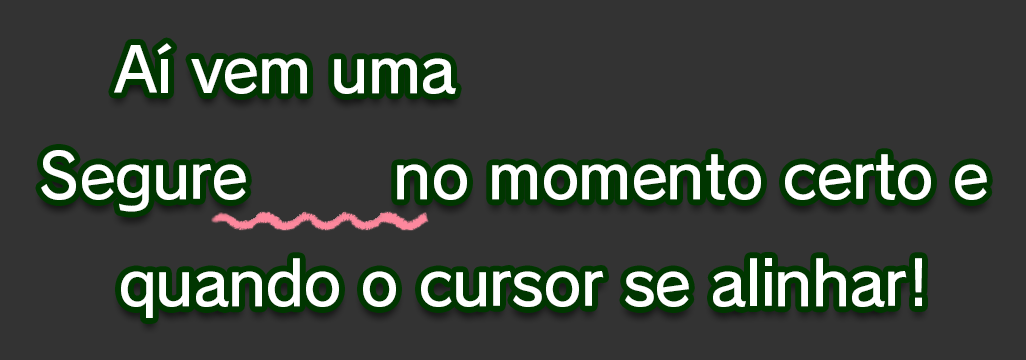
<style>
.page{position:relative;width:1026px;height:360px;background:#333333}
.page>*{position:absolute;margin:0}
.t1{font:61.3px/106.7px "RodinPro-DB";letter-spacing:-0.022em;color:#ffffff}
.t2{font:69.3px/106.7px "NewRodinPro-DB";letter-spacing:-0.022em;color:#ffffff}
</style>
<div class="page">
<p class="t1" style="left:41px;top:39px;width:946px;height:279px;text-align:center">Aí vem uma <span class="t2">Nota Longa!<br></span>Segure <span class="t2">ZR</span> no momento certo e <br>quando o cursor se alinhar!</p>
</div>
